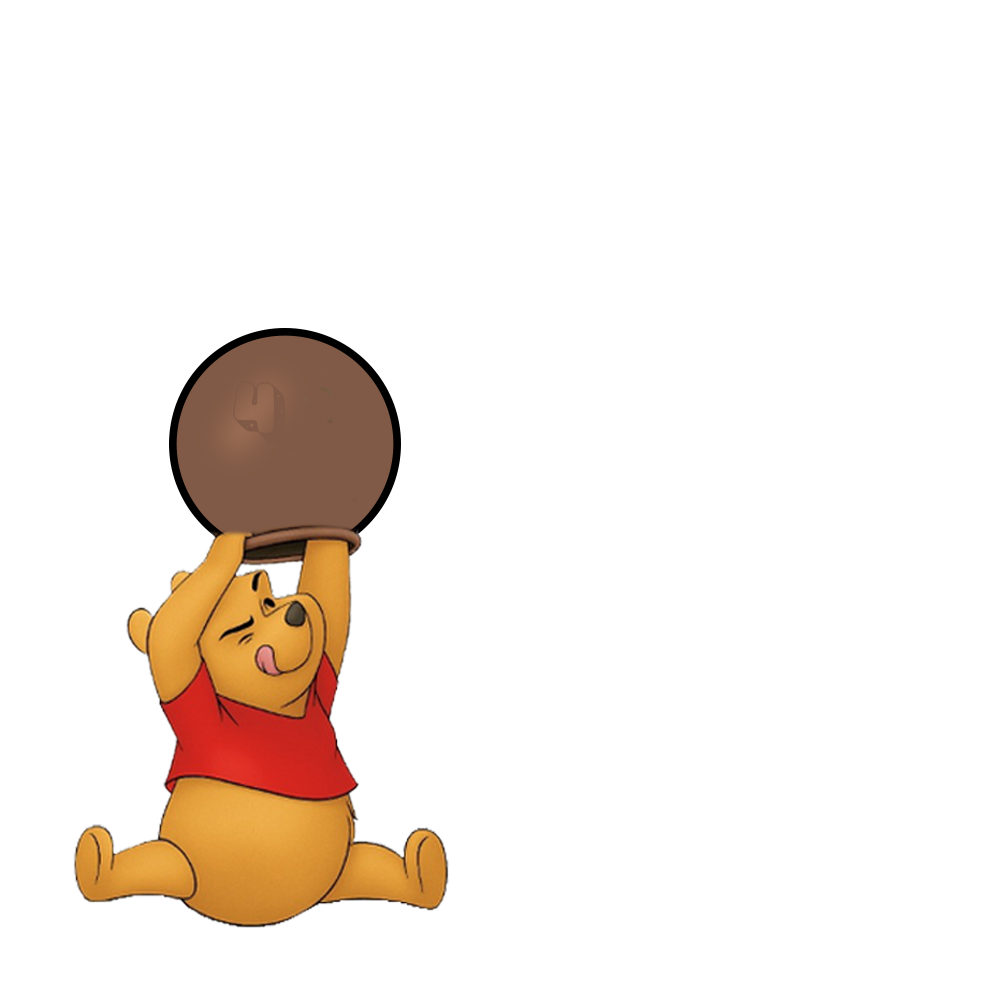
<style>
.page{position:relative;width:1000px;height:1000px;background:#ffffff}
.page>*{position:absolute;margin:0}
.t1{font:75px "SpaceTime-Regular";color:#805a46}
</style>
<div class="page">
<p class="t1" style="left:233px;top:381px;width:53px;height:64px">4</p>
</div>
